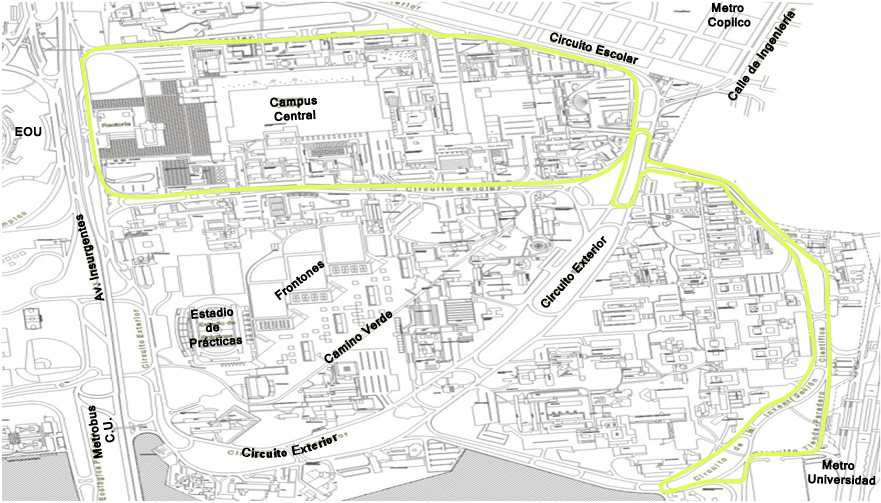
<style>
.page{position:relative;width:881px;height:503px;background:#ffffff}
.page>*{position:absolute;margin:0}
.t1{font:12px "Kartika-Bold";color:#030000}
</style>
<div class="page">
<p class="t1" style="left:708px;top:3px;width:43px;height:26px">Metro<br>Copilco</p>
<p class="t1" style="left:728px;top:11px;width:68px;height:90px;rotate:-55deg">Calle de Ingeniería</p>
<p class="t1" style="left:550px;top:32px;width:89px;height:33px;rotate:15deg">Circuito Escolar</p>
<p class="t1" style="left:270px;top:97px;width:47px;height:25px;rotate:-3deg">Campus <br> Central</p>
<p class="t1" style="left:15px;top:126px;width:27px;height:11px">EOU</p>
<p class="t1" style="left:76px;top:214px;width:29px;height:87px;rotate:-104deg">Av. Insurgentes</p>
<p class="t1" style="left:541px;top:236px;width:66px;height:72px;rotate:-48deg">Circuito Exterior</p>
<p class="t1" style="left:274px;top:261px;width:51px;height:40px;rotate:-37deg">Frontones</p>
<p class="t1" style="left:189px;top:307px;width:54px;height:41px;rotate:-4deg">Estadio<br>     de<br>Prácticas</p>
<p class="t1" style="left:324px;top:311px;width:69px;height:52px;rotate:-37deg">Camino Verde</p>
<p class="t1" style="left:88px;top:405px;width:27px;height:54px;rotate:-98deg">Metrobus<br>    C.U.</p>
<p class="t1" style="left:242px;top:434px;width:95px;height:24px;rotate:-9deg">Circuito Exterior</p>
<p class="t1" style="left:808px;top:460px;width:68px;height:25px;rotate:1deg">Metro<br>Universidad</p>
</div>
